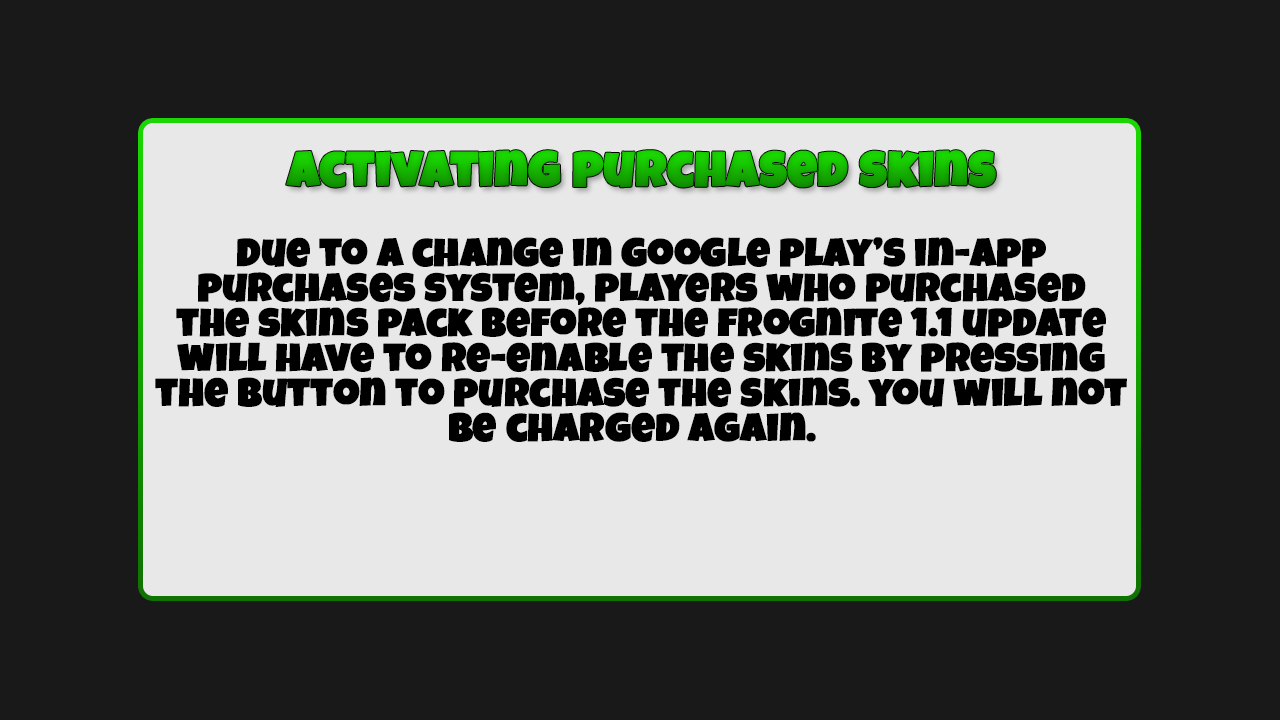
<style>
.page{position:relative;width:1280px;height:720px;background:#191919}
.page>*{position:absolute;margin:0}
.t1{font:50px "LuckiestGuy-Regular";font-weight:bold}
.t2{font:40px/35px "LuckiestGuy-Regular";color:#000000;font-weight:bold}
</style>
<div class="page">
<p class="t1" style="left:286px;top:150px;width:710px;height:38px">activating purchased skins</p>
<p class="t2" style="left:155px;top:237px;width:972px;height:205px;text-align:center">Due to a change in google play’s in-app<br>purchases system, players who purchased<br>the skins pack before the frognite 1.1 update<br>will have to re-enable the skins by pressing<br>the button to purchase the skins. you will not<br>be charged again.</p>
</div>
